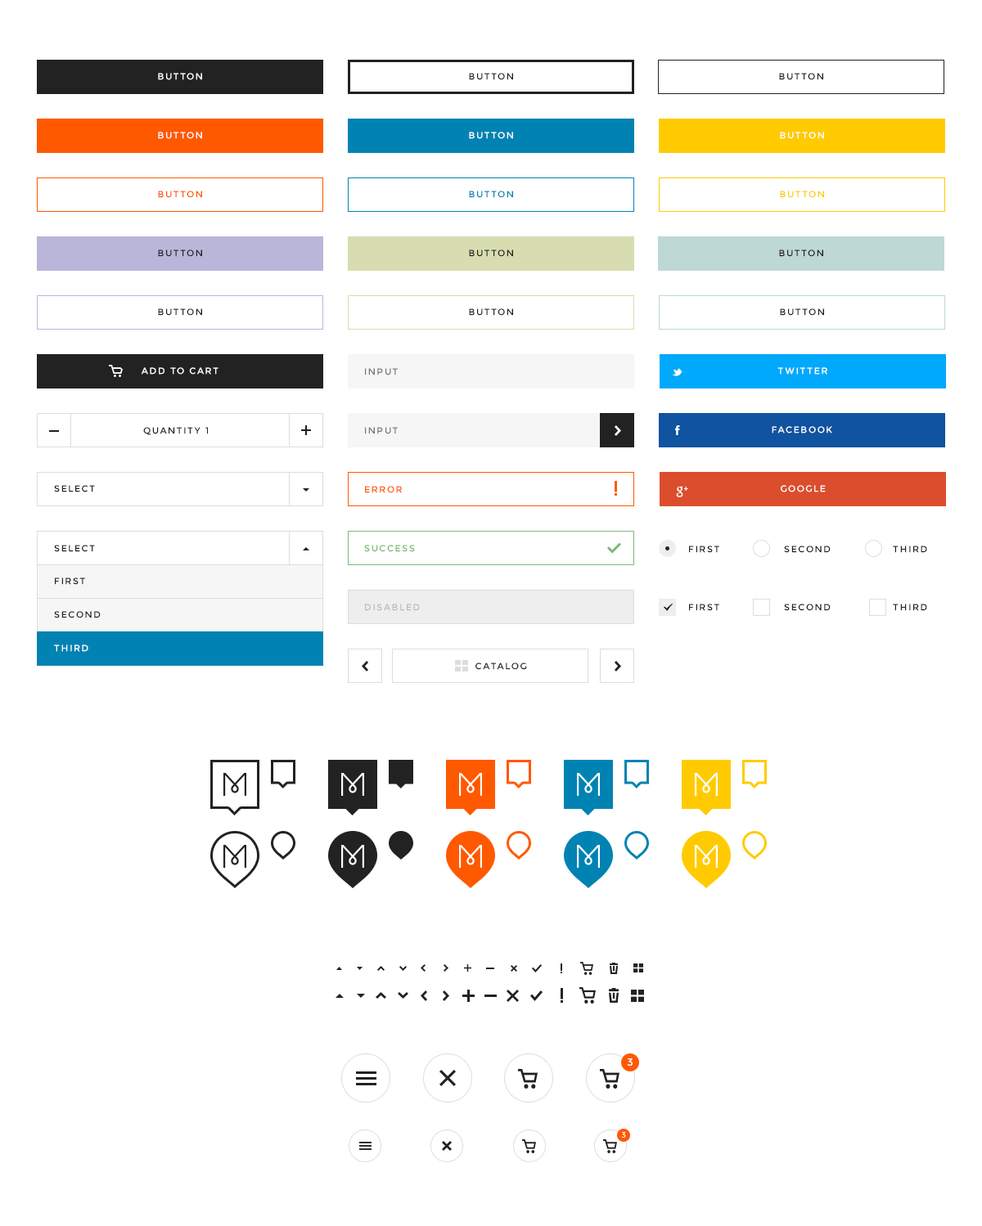
<style>
.page{position:relative;width:982px;height:1226px;background:#ffffff}
.page>*{position:absolute;margin:0}
.t1{font:9px "Montserrat-Regular";letter-spacing:0.15em;color:#ffffff}
.t2{font:9px "Montserrat-Regular";letter-spacing:0.15em;color:#222222}
.t3{font:9px "Montserrat-Regular";letter-spacing:0.15em;color:#ff5900}
.t4{font:9px "Montserrat-Regular";letter-spacing:0.15em;color:#0083b3}
.t5{font:9px "Montserrat-Regular";letter-spacing:0.15em;color:#ffcb00}
.t6{font:9px "Montserrat-Regular";letter-spacing:0.15em;color:#777777}
.t7{font:9px "Montserrat-Regular";letter-spacing:0.15em;color:#212121}
.t8{font:9px "Montserrat-Regular";letter-spacing:0.15em;color:#1f1f1f}
.t9{font:9px "Montserrat-Regular";letter-spacing:0.15em;color:#ff5800}
.t10{font:9px "Montserrat-Regular";letter-spacing:0.15em;color:#7bba74}
.t11{font:9px "Montserrat-Regular";letter-spacing:0.15em;color:#bbbbbb}
.t12{font:10.6px "Montserrat-Regular";letter-spacing:0.15em;color:#ffffff}
.t13{font:8.2px "Montserrat-Regular";letter-spacing:0.15em;color:#ffffff}
</style>
<div class="page">
<p class="t1" style="left:158px;top:73px;width:44px;height:7px">BUTTON</p>
<p class="t2" style="left:469px;top:73px;width:44px;height:7px">BUTTON</p>
<p class="t2" style="left:779px;top:73px;width:44px;height:7px">BUTTON</p>
<p class="t1" style="left:158px;top:132px;width:44px;height:7px">BUTTON</p>
<p class="t1" style="left:469px;top:132px;width:44px;height:7px">BUTTON</p>
<p class="t1" style="left:780px;top:132px;width:44px;height:7px">BUTTON</p>
<p class="t3" style="left:158px;top:191px;width:44px;height:7px">BUTTON</p>
<p class="t4" style="left:469px;top:191px;width:44px;height:7px">BUTTON</p>
<p class="t5" style="left:780px;top:191px;width:44px;height:7px">BUTTON</p>
<p class="t2" style="left:158px;top:250px;width:44px;height:7px">BUTTON</p>
<p class="t2" style="left:469px;top:250px;width:44px;height:7px">BUTTON</p>
<p class="t2" style="left:779px;top:250px;width:44px;height:7px">BUTTON</p>
<p class="t2" style="left:158px;top:308px;width:44px;height:8px">BUTTON</p>
<p class="t2" style="left:469px;top:308px;width:44px;height:8px">BUTTON</p>
<p class="t2" style="left:780px;top:308px;width:44px;height:8px">BUTTON</p>
<p class="t1" style="left:141px;top:367px;width:77px;height:8px">ADD TO CART</p>
<p class="t6" style="left:365px;top:368px;width:33px;height:8px">INPUT</p>
<p class="t1" style="left:777px;top:367px;width:50px;height:8px">TWITTER</p>
<p class="t7" style="left:143px;top:427px;width:65px;height:8px">QUANTITY 1</p>
<p class="t6" style="left:365px;top:427px;width:33px;height:7px">INPUT</p>
<p class="t1" style="left:772px;top:426px;width:60px;height:8px">FACEBOOK</p>
<p class="t8" style="left:54px;top:485px;width:41px;height:8px">SELECT</p>
<p class="t1" style="left:781px;top:485px;width:45px;height:8px">GOOGLE</p>
<p class="t9" style="left:365px;top:486px;width:37px;height:7px">ERROR</p>
<p class="t8" style="left:54px;top:545px;width:41px;height:7px">SELECT</p>
<p class="t10" style="left:364px;top:545px;width:51px;height:7px">SUCCESS</p>
<p class="t8" style="left:689px;top:546px;width:30px;height:7px">FIRST</p>
<p class="t8" style="left:784px;top:546px;width:46px;height:7px">SECOND</p>
<p class="t8" style="left:893px;top:546px;width:34px;height:7px">THIRD</p>
<p class="t8" style="left:55px;top:578px;width:30px;height:7px">FIRST</p>
<p class="t11" style="left:365px;top:604px;width:55px;height:7px">DISABLED</p>
<p class="t8" style="left:689px;top:604px;width:30px;height:7px">FIRST</p>
<p class="t8" style="left:784px;top:604px;width:46px;height:7px">SECOND</p>
<p class="t8" style="left:893px;top:604px;width:34px;height:7px">THIRD</p>
<p class="t8" style="left:54px;top:611px;width:47px;height:8px">SECOND</p>
<p class="t1" style="left:54px;top:645px;width:34px;height:7px">THIRD</p>
<p class="t7" style="left:475px;top:663px;width:52px;height:7px">CATALOG</p>
<p class="t12" style="left:627px;top:1059px;width:5px;height:7px">3</p>
<p class="t13" style="left:621px;top:1132px;width:5px;height:6px">3</p>
</div>
